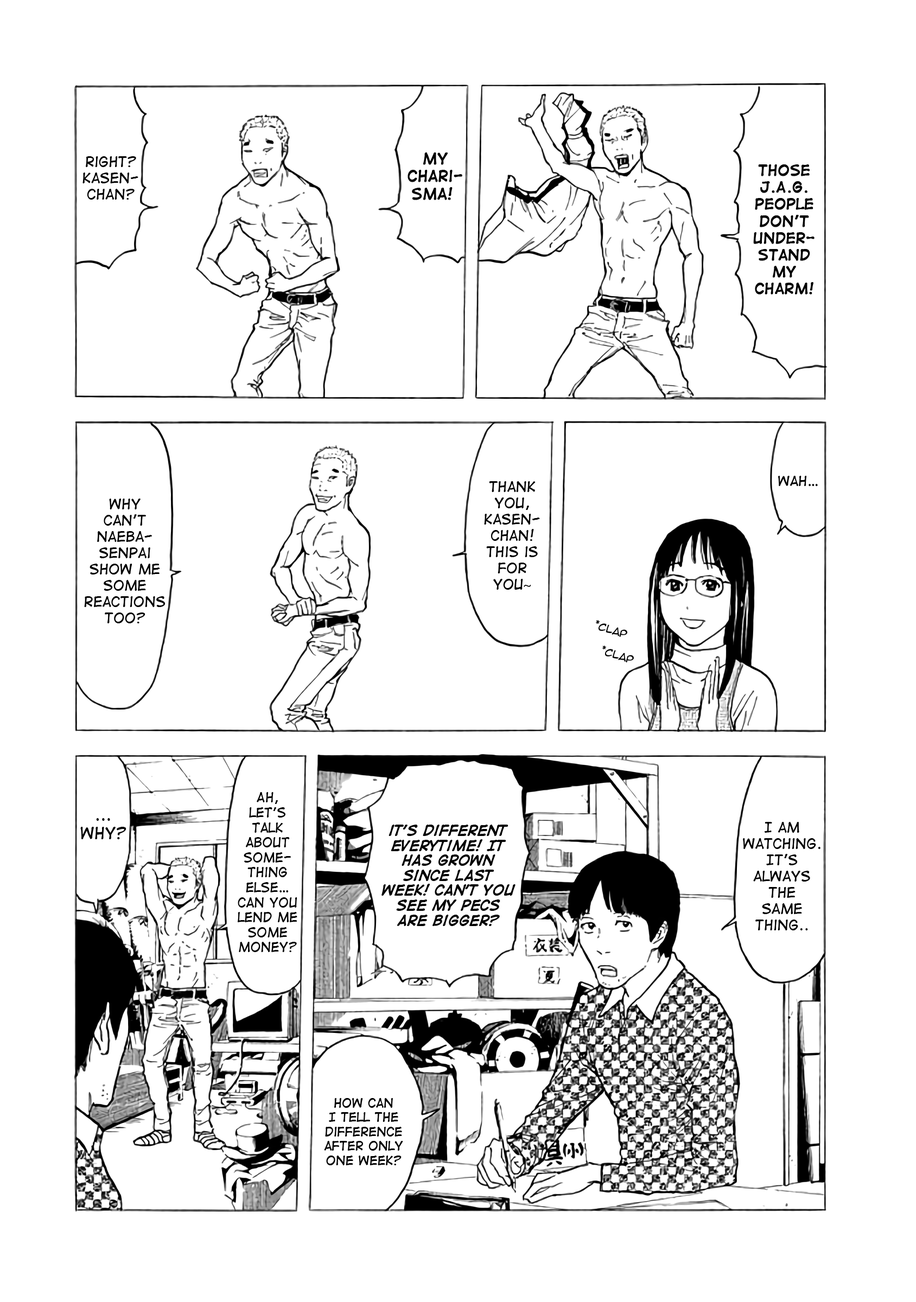
<style>
.page{position:relative;width:916px;height:1302px;background:#ffffff}
.page>*{position:absolute;margin:0}
.t1{font:13.6px "DigitalStrip";color:#000000}
.t2{font:14.6px "DigitalStrip";color:#000000;font-weight:bold}
.t3{font:14.1px "DigitalStrip";color:#000000;font-weight:bold}
.t4{font:13.6px "MyriadPro-Regular";color:#000000}
.t5{font:13px "DigitalStrip";color:#000000}
.t6{font:9.8px "AnimeAce2.0BB";color:#000000}
.t7{font:12.5px "DigitalStrip";color:#000000}
.t8{font:15.2px "DigitalStrip";color:#000000}
.t9{font:12.5px "DigitalStripBold";color:#000000}
.t10{font:11.9px "DigitalStrip";color:#000000}
</style>
<div class="page">
<p class="t1" style="left:82px;top:156px;width:56px;height:44px;text-align:center">right?<br>Kasen-<br>chan?</p>
<p class="t2" style="left:407px;top:152px;width:55px;height:48px;text-align:center">my<br>chari-<br>sma!</p>
<p class="t3" style="left:753px;top:164px;width:61px;height:131px;text-align:center">Those<br>J.A.G.<br>people<br>don’t<br>under-<br>stand<br>my<br>charm!</p>
<p class="t1" style="left:484px;top:481px;width:56px;height:109px;text-align:center">Thank<br>you,<br>Kasen-<br>chan!<br>This is<br>for<br>you<span class="t4">~</span></p>
<p class="t5" style="left:778px;top:476px;width:40px;height:10px">Wah…</p>
<p class="t1" style="left:84px;top:499px;width:81px;height:124px;text-align:center">Why<br>can’t<br>naeba-<br>Senpai<br>show me<br>some<br>reactions<br>too?</p>
<p class="t6" style="left:596px;top:620px;width:31px;height:17px;rotate:18deg">*clap</p>
<p class="t6" style="left:602px;top:646px;width:32px;height:16px;rotate:18deg">*clap</p>
<p class="t7" style="left:238px;top:792px;width:59px;height:160px;text-align:center">Ah,<br>let’s<br>talk<br>about<br>some-<br>thing<br>else…<br>Can you<br>lend me<br>some<br>money?</p>
<p class="t8" style="left:80px;top:818px;width:46px;height:21px;text-align:center">...<br>WHY?</p>
<p class="t1" style="left:743px;top:822px;width:77px;height:108px;text-align:center">I am<br>watching.<br>It’s<br>always<br>the<br>same<br>thing..</p>
<p class="t9" style="left:381px;top:825px;width:134px;height:101px;text-align:center">it’s different<br>everytime! It has grown since last week! can’t you see my pecs<br>are bigger?</p>
<p class="t10" style="left:324px;top:1098px;width:79px;height:67px;text-align:center">How can<br>I tell the<br>difference<br>after only<br>one week?</p>
</div>
